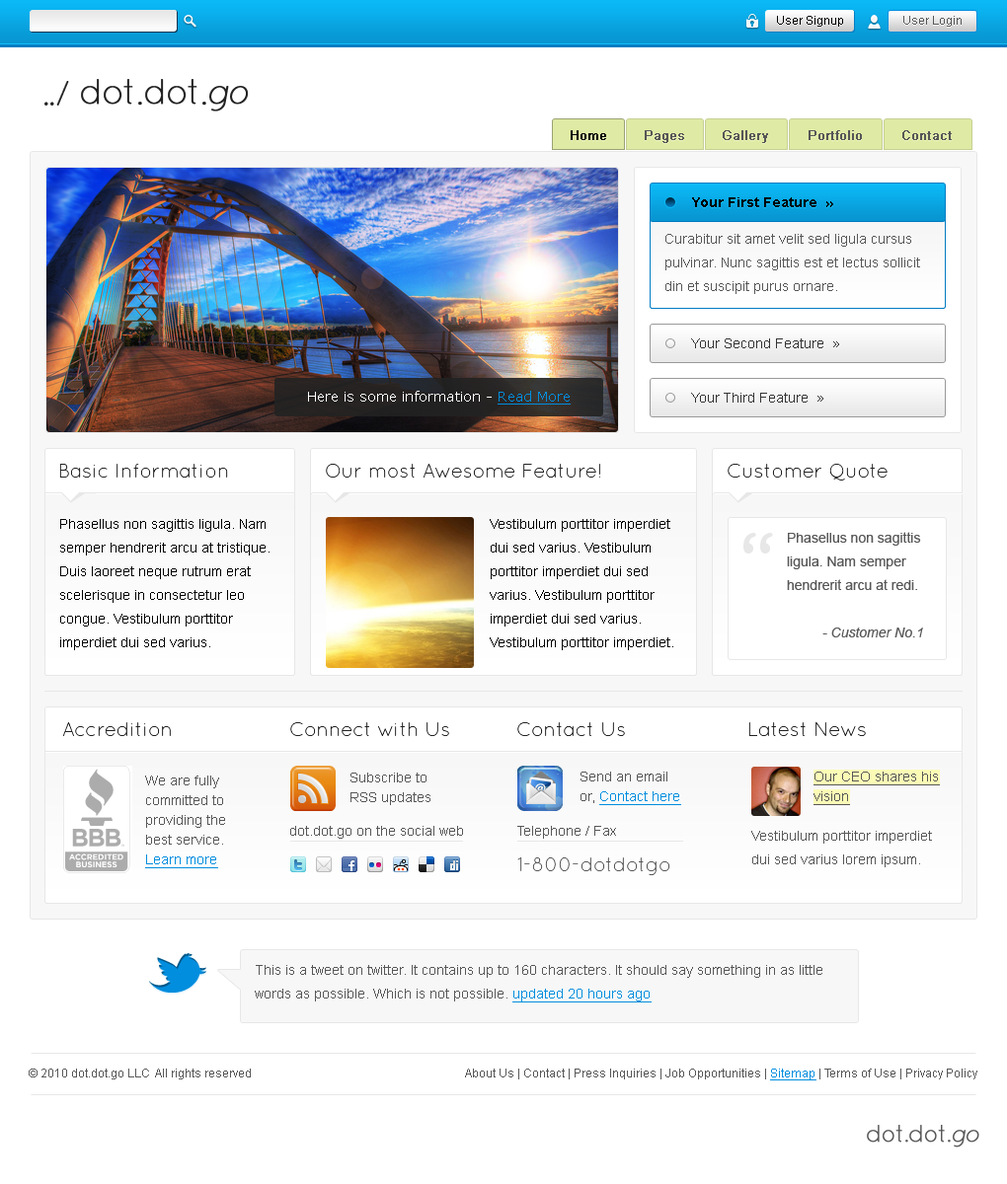
<style>
.page{position:relative;width:1007px;height:1184px;background:#ffffff}
.page>*{position:absolute;margin:0}
.t1{font:11.8px "ArialMT"}
.t2{font:11.8px "ArialMT";color:#000000}
.t3{font:11.8px "ArialMT";color:#575757}
.t4{font:35.5px "QuicksandBook-Regular";letter-spacing:-0.05em;color:#222222}
.t5{font:35.5px "QuicksandLight-Regular";letter-spacing:-0.05em;color:#222222;font-weight:bold}
.t6{font:35.5px "QuicksandLightOblique-Regular";letter-spacing:-0.05em;color:#222222;font-weight:bold}
.t7{font:12.8px "ArialMT";color:#000000;font-weight:bold}
.t8{font:12.8px "ArialMT";font-weight:bold}
.t9{font:12.8px "ArialMT";color:#575757;font-weight:bold}
.t10{font:13.8px "Arial-BoldMT";color:#000000}
.t11{font:13.8px/23.7px "ArialMT";color:#575757}
.t12{font:13.8px "ArialMT";color:#333333}
.t13{font:13.8px "Verdana";color:#ffffff}
.t14{font:13.8px "Verdana";color:#018ede;text-decoration:underline}
.t15{font:19.7px "QuicksandLight-Regular";color:#222222}
.t16{font:13.8px/23.7px "ArialMT";color:#000000}
.t17{font:71.1px "QuicksandBold-Regular";color:#e7e7e7}
.t18{font:13.8px/23.7px "Arial-ItalicMT";color:#575757}
.t19{font:13.8px/19.7px "ArialMT";color:#575757}
.t20{font:13.8px/19.7px "ArialMT";color:#018ede;text-decoration:underline}
.t21{font:13.8px/19.7px "ArialMT";color:#575757;text-decoration:underline}
.t22{font:13.8px "ArialMT";color:#575757}
.t23{font:19.7px "QuicksandLight-Regular";color:#575757}
.t24{font:11.8px "ArialMT";color:#018ede;text-decoration:underline}
.t25{font:23.7px "QuicksandLight-Regular";letter-spacing:-0.05em;color:#575757;font-weight:bold}
.t26{font:23.7px "QuicksandLightOblique-Regular";letter-spacing:-0.05em;color:#575757;font-weight:bold}
</style>
<div class="page">
<p class="t1" style="left:777px;top:17px;width:66px;height:11px">User Signup</p>
<p class="t2" style="left:777px;top:16px;width:66px;height:11px">User Signup</p>
<p class="t3" style="left:903px;top:16px;width:58px;height:11px">User Login</p>
<p class="t4" style="left:44px;top:81px;width:25px;height:25px">../</p>
<p class="t5" style="left:81px;top:79px;width:168px;height:33px">dot.dot.<span class="t6">go</span></p>
<p class="t7" style="left:570px;top:131px;width:36px;height:10px">Home</p>
<p class="t7" style="left:570px;top:130px;width:36px;height:10px">Home</p>
<p class="t8" style="left:645px;top:131px;width:39px;height:13px">Pages</p>
<p class="t9" style="left:645px;top:130px;width:39px;height:13px">Pages</p>
<p class="t8" style="left:722px;top:131px;width:46px;height:13px">Gallery</p>
<p class="t9" style="left:722px;top:130px;width:46px;height:13px">Gallery</p>
<p class="t9" style="left:808px;top:131px;width:54px;height:10px">Portfolio</p>
<p class="t9" style="left:808px;top:130px;width:54px;height:10px">Portfolio</p>
<p class="t8" style="left:902px;top:131px;width:49px;height:10px">Contact</p>
<p class="t9" style="left:902px;top:130px;width:49px;height:10px">Contact</p>
<p class="t10" style="left:692px;top:197px;width:141px;height:10px">Your First Feature  »</p>
<p class="t10" style="left:692px;top:198px;width:141px;height:10px">Your First Feature  »</p>
<p class="t11" style="left:665px;top:234px;width:255px;height:60px">Curabitur sit amet velit sed ligula cursus<br>pulvinar. Nunc sagittis est et lectus sollicit<br>din et suscipit purus ornare.</p>
<p class="t12" style="left:691px;top:339px;width:148px;height:9px">Your Second Feature  »</p>
<p class="t13" style="left:308px;top:391px;width:262px;height:14px">Here is some information - <span class="t14">Read More</span></p>
<p class="t12" style="left:691px;top:393px;width:132px;height:10px">Your Third Feature  »</p>
<p class="t15" style="left:59px;top:464px;width:169px;height:14px">Basic Information</p>
<p class="t15" style="left:326px;top:464px;width:274px;height:14px">Our most Awesome Feature!</p>
<p class="t15" style="left:727px;top:464px;width:160px;height:17px">Customer Quote</p>
<p class="t16" style="left:60px;top:519px;width:209px;height:131px">Phasellus non sagittis ligula. Nam<br>semper hendrerit arcu at tristique.<br>Duis laoreet neque rutrum erat<br>scelerisque in consectetur leo<br>congue. Vestibulum porttitor<br>imperdiet dui sed varius.</p>
<p class="t16" style="left:490px;top:519px;width:183px;height:131px">Vestibulum porttitor imperdiet<br>dui sed varius. Vestibulum<br>porttitor imperdiet dui sed<br>varius. Vestibulum porttitor<br>imperdiet dui sed varius.<br>Vestibulum porttitor imperdiet.</p>
<p class="t17" style="left:743px;top:533px;width:30px;height:21px">“</p>
<p class="t11" style="left:787px;top:532px;width:136px;height:106px">Phasellus non sagittis<br>ligula. Nam semper<br>hendrerit arcu at redi.<br> <br> <span class="t18">- Customer No.1</span></p>
<p class="t15" style="left:63px;top:722px;width:108px;height:14px">Accredition</p>
<p class="t15" style="left:290px;top:722px;width:159px;height:14px">Connect with Us</p>
<p class="t15" style="left:517px;top:722px;width:108px;height:14px">Contact Us</p>
<p class="t15" style="left:748px;top:722px;width:118px;height:14px">Latest News</p>
<p class="t19" style="left:350px;top:773px;width:80px;height:32px">Subscribe to<br>RSS updates</p>
<p class="t19" style="left:580px;top:772px;width:101px;height:33px">Send an email<br>or, <span class="t20">Contact here</span></p>
<p class="t21" style="left:813px;top:772px;width:127px;height:33px">Our CEO shares his<br>vision</p>
<p class="t19" style="left:145px;top:776px;width:80px;height:93px">We are fully<br>committed to<br>providing the<br>best service.<br><span class="t20">Learn more</span></p>
<p class="t22" style="left:290px;top:826px;width:173px;height:13px">dot.dot.go on the social web</p>
<p class="t22" style="left:517px;top:826px;width:99px;height:13px">Telephone / Fax</p>
<p class="t11" style="left:751px;top:831px;width:181px;height:37px">Vestibulum porttitor imperdiet<br>dui sed varius lorem ipsum.</p>
<p class="t23" style="left:517px;top:858px;width:153px;height:17px">1-800-dotdotgo</p>
<p class="t3" style="left:29px;top:1069px;width:222px;height:11px">© 2010 dot.dot.go LLC  All rights reserved</p>
<p class="t3" style="left:465px;top:1069px;width:512px;height:12px">About Us | Contact | Press Inquiries | Job Opportunities | <span class="t24">Sitemap</span> | Terms of Use | Privacy Policy</p>
<p class="t25" style="left:867px;top:1125px;width:112px;height:23px">dot.dot.<span class="t26">go</span></p>
</div>
